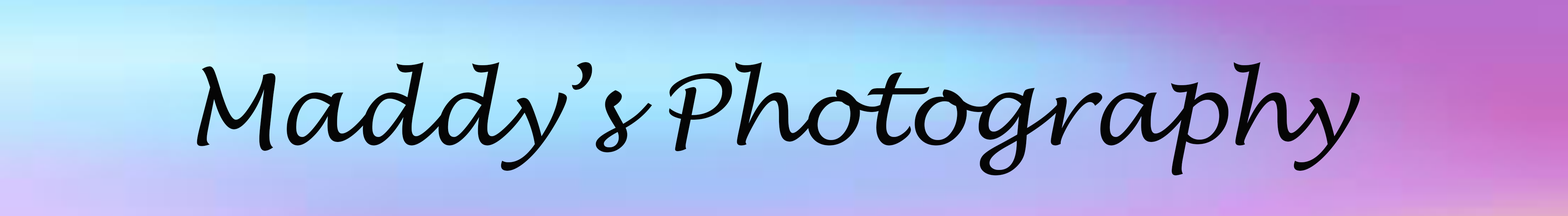
<style>
.page{position:relative;width:1568px;height:216px}
.page>*{position:absolute;margin:0}
.t1{font:96.1px "LucidaHandwriting-Italic";color:#050505}
</style>
<div class="page">
<p class="t1" style="left:197px;top:62px;width:1163px;height:114px">Maddy’s Photography</p>
</div>
